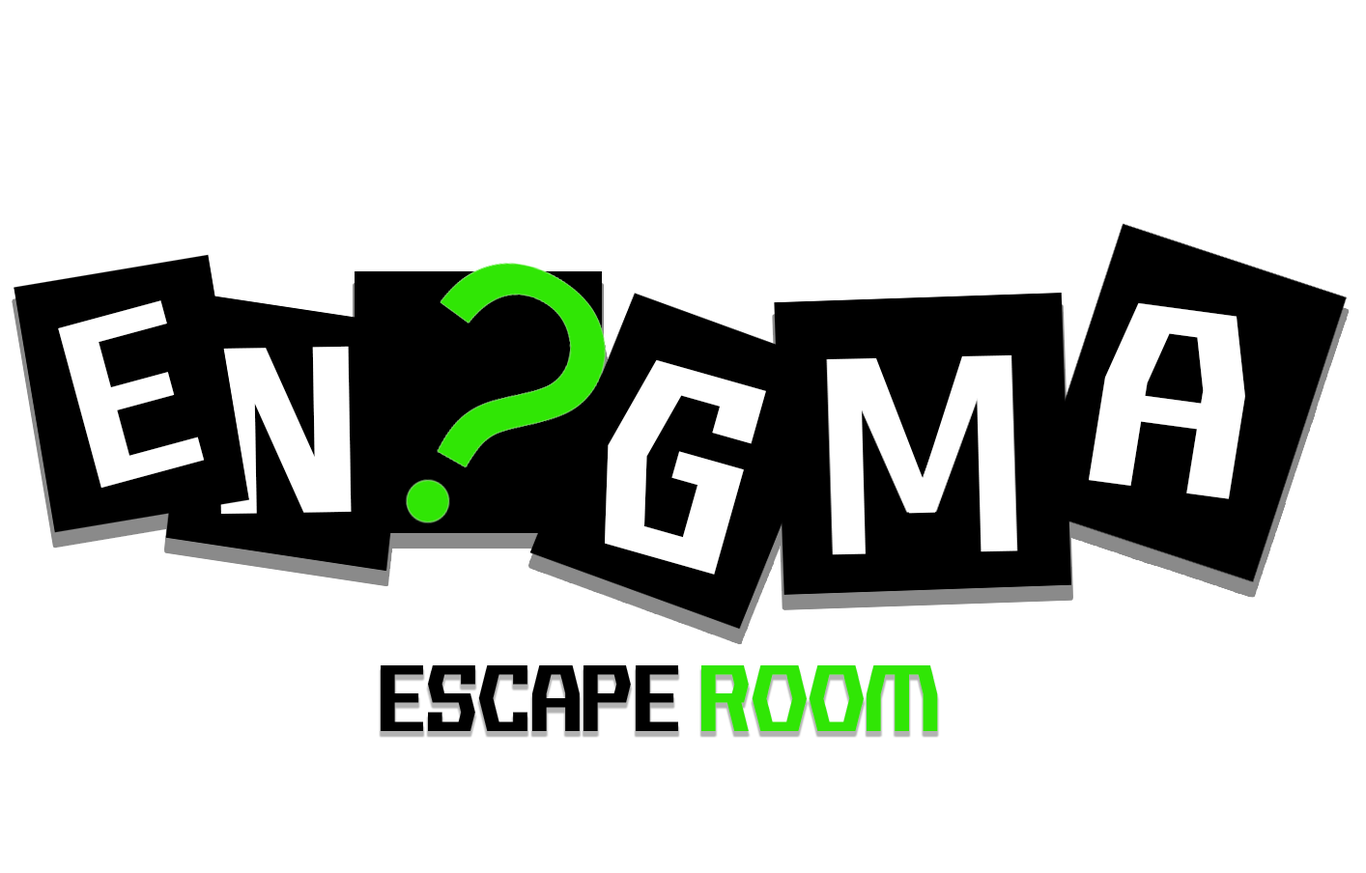
<style>
.page{position:relative;width:1366px;height:873px;background:#ffffff}
.page>*{position:absolute;margin:0}
.t1{font:241.5px "BackgroundNoise";color:#ffffff}
.t2{font:266.1px "BackgroundNoise";color:#ffffff;scale:1.09 1}
.t3{font:278.4px "BackgroundNoise";color:#ffffff}
.t4{font:96.6px "BackgroundNoise";color:#000000}
.t5{font:96.6px "BackgroundNoise";color:#30e605}
</style>
<div class="page">
<p class="t1" style="left:58px;top:300px;width:147px;height:188px;rotate:-15deg">E</p>
<p class="t2" style="left:1089px;top:302px;width:156px;height:197px;rotate:8deg">A</p>
<p class="t1" style="left:218px;top:346px;width:134px;height:168px;rotate:-1deg">n</p>
<p class="t3" style="left:605px;top:359px;width:161px;height:216px;rotate:16deg">G</p>
<p class="t4" style="left:381px;top:665px;width:557px;height:66px">Escape <span class="t5">room</span></p>
</div>
